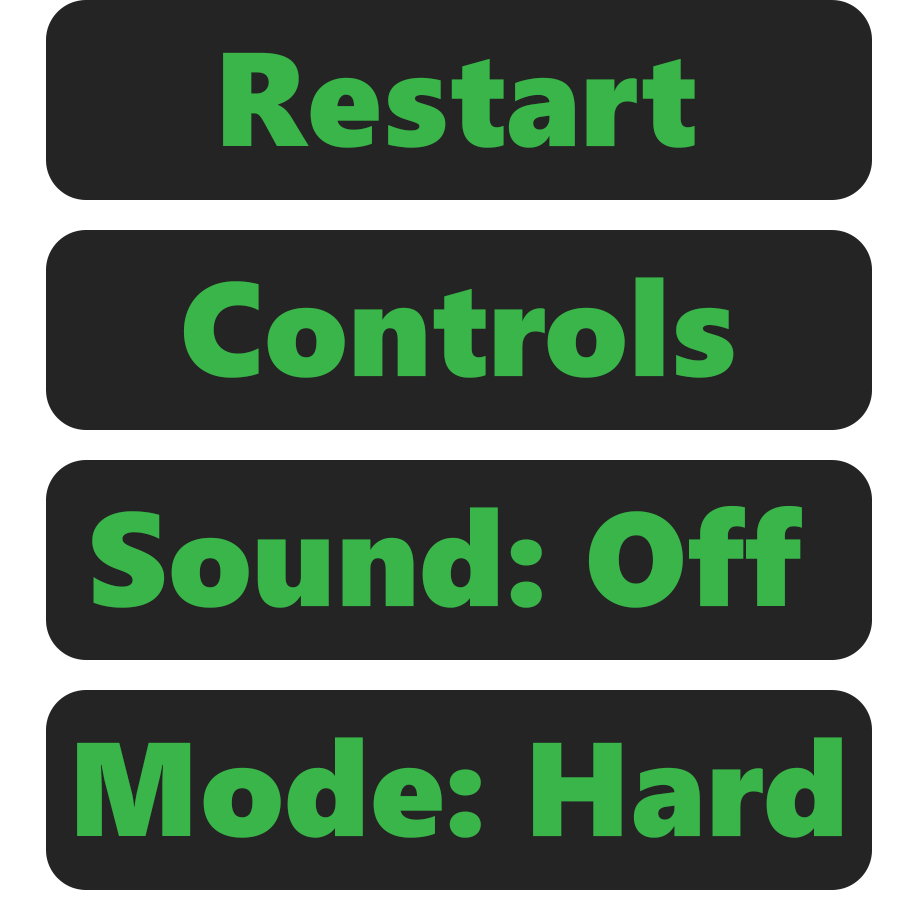
<style>
.page{position:relative;width:918px;height:918px;background:#242424}
.page>*{position:absolute;margin:0}
.t1{font:133.3px "SegoeWP-Black";color:#39b54a}
</style>
<div class="page">
<p class="t1" style="left:223px;top:52px;width:472px;height:96px">Restart</p>
<p class="t1" style="left:183px;top:277px;width:551px;height:101px">Controls</p>
<p class="t1" style="left:92px;top:505px;width:710px;height:103px">Sound: Off</p>
<p class="t1" style="left:77px;top:737px;width:765px;height:101px">Mode: Hard</p>
</div>
